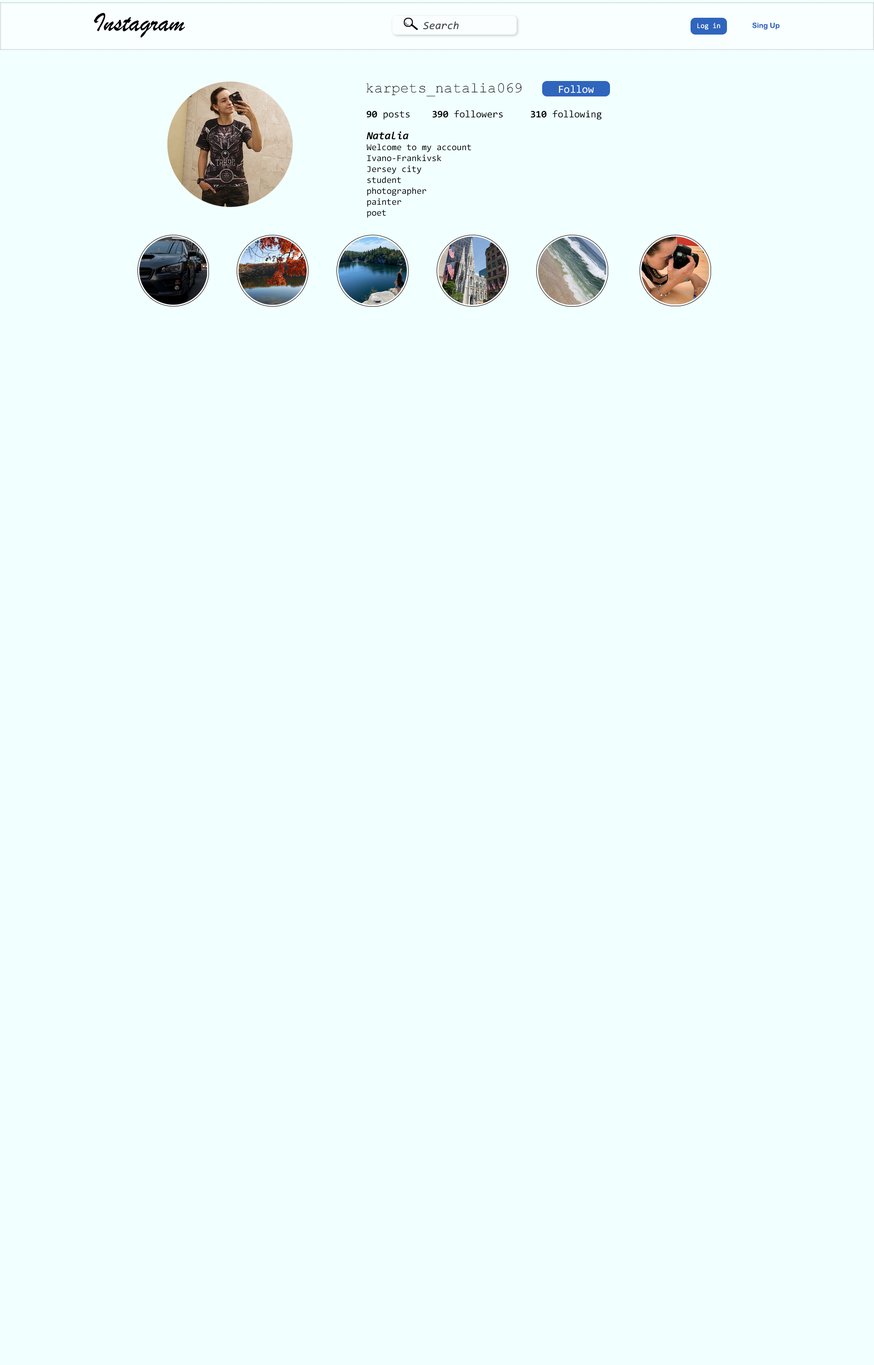
<style>
.page{position:relative;width:874px;height:1365px;background:#f1fffe}
.page>*{position:absolute;margin:0}
.t1{font:27.3px "BrushScriptMT";color:#000000}
.t2{font:10.9px "Consolas-Italic";color:#484848}
.t3{font:7.3px "Consolas";color:#fefefe}
.t4{font:7.3px "ArialRoundedMTBold";color:#2f65bd}
.t5{font:14.6px "CourierNewPSMT";color:#000000}
.t6{font:10.9px "Consolas";color:#ffffff}
.t7{font:10px "Consolas";color:#000000}
.t8{font:10px "Consolas-Bold";color:#000000}
.t9{font:9.1px "Consolas";color:#000000}
.t10{font:10.9px "Consolas-BoldItalic";color:#000000}
</style>
<div class="page">
<p class="t1" style="left:94px;top:13px;width:91px;height:25px">Instagram</p>
<p class="t2" style="left:423px;top:21px;width:36px;height:9px">Search</p>
<p class="t3" style="left:697px;top:23px;width:23px;height:7px">Log in</p>
<p class="t4" style="left:752px;top:22px;width:27px;height:8px">Sing Up</p>
<p class="t5" style="left:366px;top:83px;width:155px;height:13px">karpets_natalia069</p>
<p class="t6" style="left:559px;top:85px;width:35px;height:8px">Follow</p>
<p class="t7" style="left:366px;top:110px;width:236px;height:10px"><span class="t8">90</span> posts  <span class="t8">390</span> followers  <span class="t8">310</span> following</p>
<p class="t9" style="left:366px;top:131px;width:105px;height:86px"><span class="t10">Natalia<br></span>Welcome to my account<br>Ivano-Frankivsk<br>Jersey city<br>student<br>photographer<br>painter<br>poet</p>
</div>
